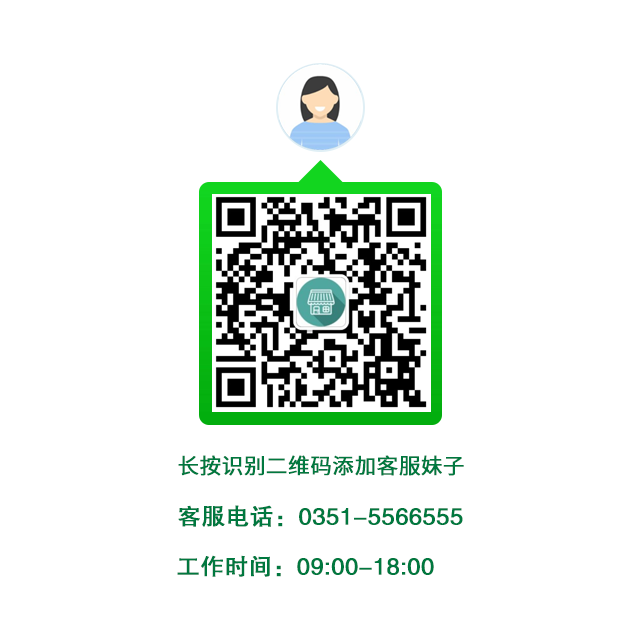
<style>
.page{position:relative;width:640px;height:640px;background:#ffffff}
.page>*{position:absolute;margin:0}
.t1{font:21.6px "SourceHanSansCN-Regular";color:#00783f;font-weight:bold}
.t2{font:23.6px "FZHTJW--GB1-0";color:#00783f;font-weight:bold}
.t3{font:23.5px "FZHTJW--GB1-0";color:#00783f;font-weight:bold}
</style>
<div class="page">
<p class="t1" style="left:178px;top:455px;width:286px;height:21px">长按识别二维码添加客服妹子</p>
<p class="t2" style="left:178px;top:505px;width:285px;height:22px">客服电话：0351-5566555</p>
<p class="t3" style="left:177px;top:555px;width:257px;height:22px">工作时间：09:00-18:00</p>
</div>
